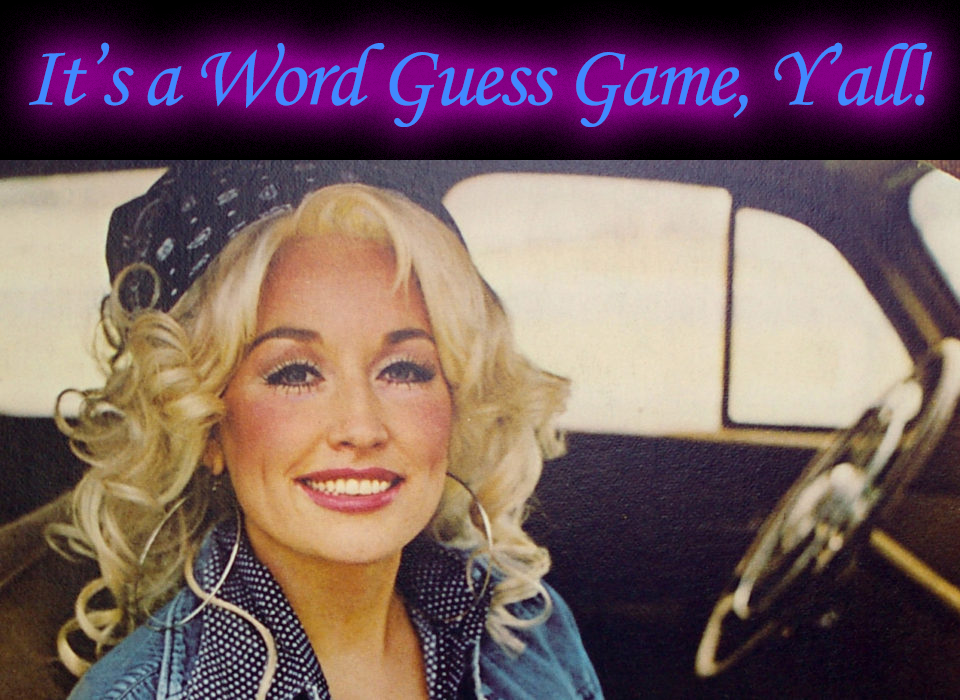
<style>
.page{position:relative;width:960px;height:700px}
.page>*{position:absolute;margin:0}
.t1{font:88.9px "MonotypeCorsiva";letter-spacing:-0.03em;color:#4189ff}
</style>
<div class="page">
<p class="t1" style="left:29px;top:42px;width:903px;height:85px">It’s a Word Guess Game, Y’all!</p>
</div>
